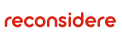
<style>
.page{position:relative;width:122px;height:41px;background:#ffffff}
.page>*{position:absolute;margin:0}
.t1{font:22.7px "AristotelicaDisplayTrial-DmBd";color:#da2315}
</style>
<div class="page">
<p class="t1" style="left:4px;top:12px;width:112px;height:16px">reconsidere</p>
</div>
